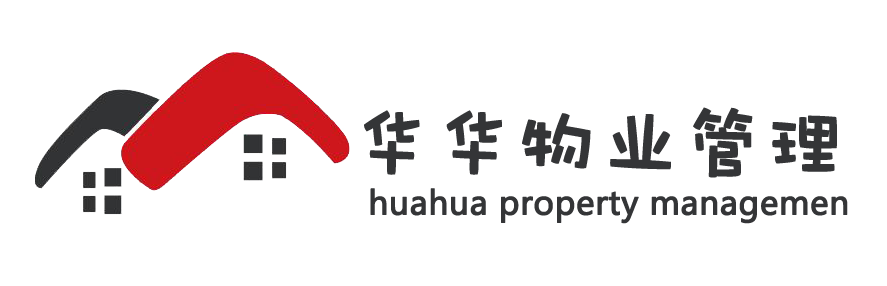
<style>
.page{position:relative;width:887px;height:286px;background:#ffffff}
.page>*{position:absolute;margin:0}
.t1{font:80.4px "DFPWaWaW5";color:#343537;font-weight:bold}
.t2{font:32.2px "MicrosoftYaHei";color:#343537;font-weight:bold}
</style>
<div class="page">
<p class="t1" style="left:364px;top:107px;width:473px;height:71px">华华物业管理</p>
<p class="t2" style="left:370px;top:188px;width:478px;height:36px">huahua property managemen</p>
</div>
